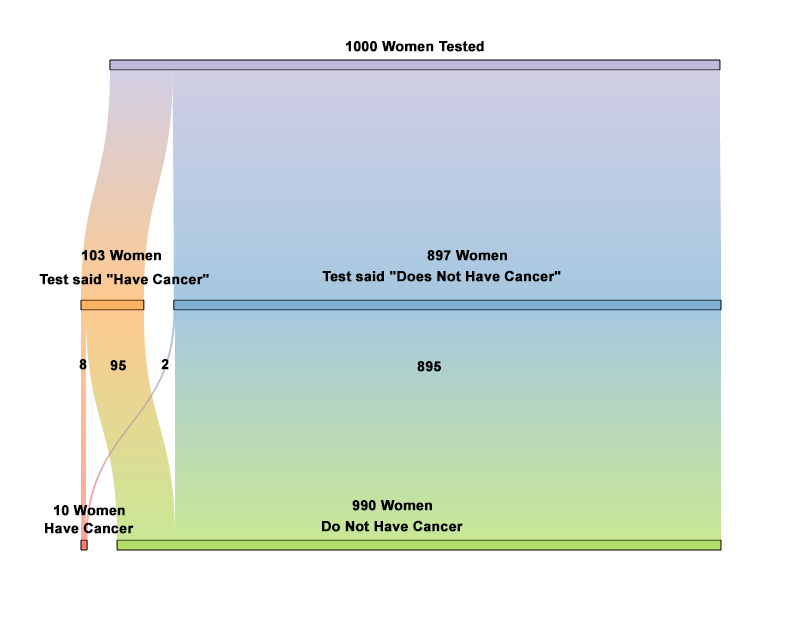
<style>
.page{position:relative;width:802px;height:617px;background:#ffffff}
.page>*{position:absolute;margin:0}
.t1{font:14px "Arial-BoldMT";color:#000000;font-weight:bold}
</style>
<div class="page">
<p class="t1" style="left:346px;top:41px;width:138px;height:11px">1000 Women Tested</p>
<p class="t1" style="left:82px;top:250px;width:79px;height:11px">103 Women</p>
<p class="t1" style="left:427px;top:250px;width:80px;height:11px">897 Women</p>
<p class="t1" style="left:322px;top:270px;width:239px;height:12px">Test said "Does Not Have Cancer"</p>
<p class="t1" style="left:39px;top:273px;width:170px;height:12px">Test said "Have Cancer"</p>
<p class="t1" style="left:79px;top:359px;width:8px;height:11px">8</p>
<p class="t1" style="left:110px;top:360px;width:16px;height:11px">95</p>
<p class="t1" style="left:161px;top:359px;width:8px;height:11px">2</p>
<p class="t1" style="left:417px;top:361px;width:24px;height:11px">895</p>
<p class="t1" style="left:54px;top:505px;width:71px;height:11px">10 Women</p>
<p class="t1" style="left:352px;top:500px;width:80px;height:11px">990 Women</p>
<p class="t1" style="left:322px;top:520px;width:141px;height:12px">Do Not Have Cancer</p>
<p class="t1" style="left:45px;top:522px;width:89px;height:12px">Have Cancer</p>
</div>
